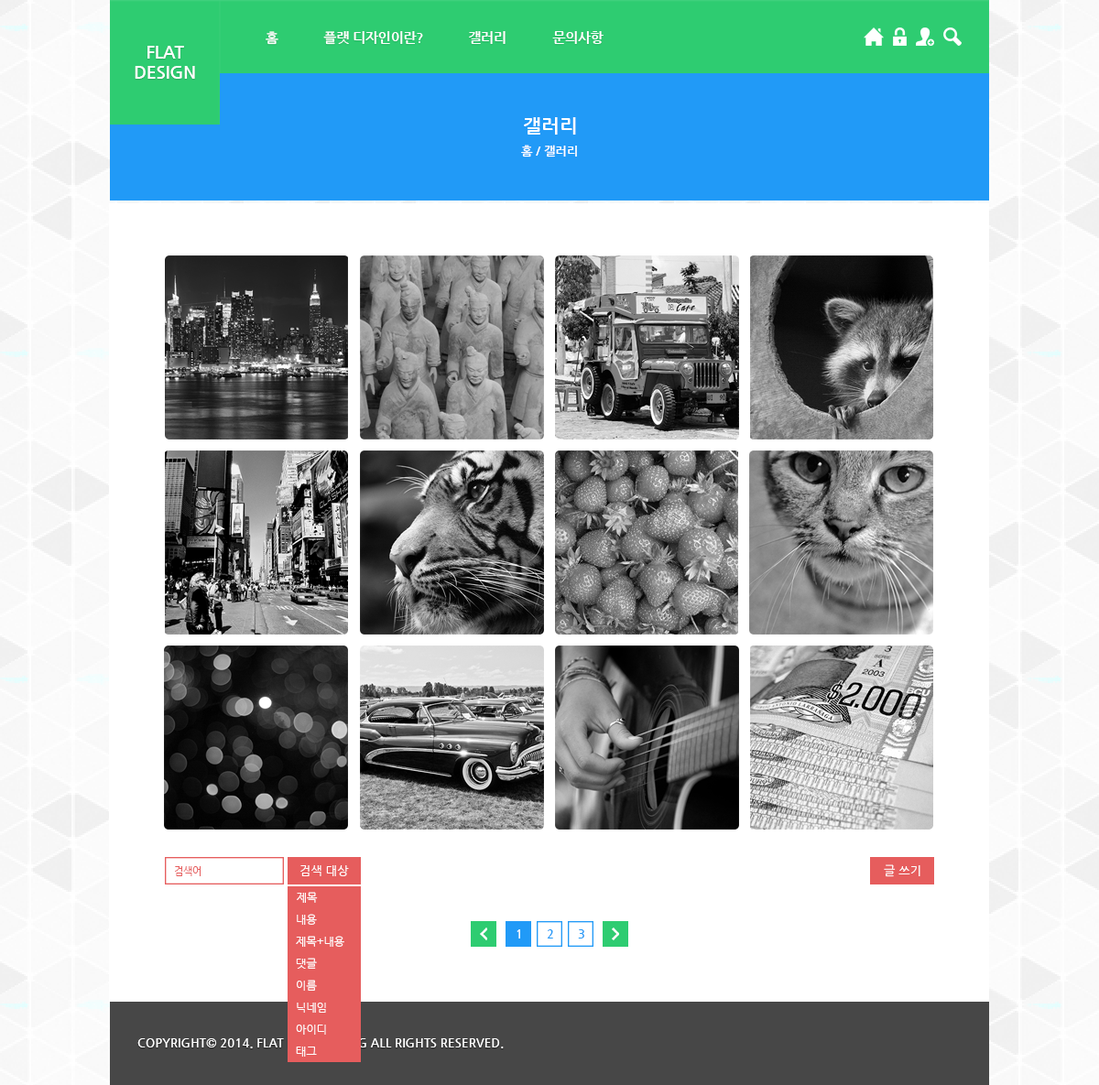
<style>
.page{position:relative;width:1099px;height:1085px;background:#ffffff}
.page>*{position:absolute;margin:0}
.t1{font:13.4px "NanumGothicBold";color:#ffffff}
.t2{font:17.1px "NanumGothicBold";color:#ffffff}
.t3{font:19.5px "NanumGothicBold";color:#ffffff}
.t4{font:12.2px "NanumGothicBold";color:#ffffff}
.t5{font:9.8px "NanumGothic";color:#e65d5d}
.t6{font:12.2px "NanumGothic";color:#ffffff}
.t7{font:11px "NanumGothic";color:#fffefe}
.t8{font:12.2px "NanumGothicBold";color:#219af7}
</style>
<div class="page">
<p class="t1" style="left:266px;top:31px;width:12px;height:14px">홈</p>
<p class="t1" style="left:323px;top:31px;width:100px;height:14px">플랫 디자인이란?</p>
<p class="t1" style="left:469px;top:31px;width:36px;height:13px">갤러리</p>
<p class="t1" style="left:552px;top:31px;width:51px;height:13px">문의사항</p>
<p class="t2" style="left:135px;top:46px;width:60px;height:33px;text-align:center">FLAT<br>DESIGN</p>
<p class="t3" style="left:524px;top:117px;width:52px;height:18px">갤러리</p>
<p class="t4" style="left:521px;top:145px;width:56px;height:13px">홈 / 갤러리</p>
<p class="t5" style="left:175px;top:866px;width:26px;height:10px">검색어</p>
<p class="t6" style="left:300px;top:865px;width:49px;height:11px">검색 대상</p>
<p class="t6" style="left:884px;top:864px;width:36px;height:13px">글 쓰기</p>
<p class="t7" style="left:297px;top:892px;width:21px;height:11px">제목</p>
<p class="t7" style="left:297px;top:914px;width:20px;height:11px">내용</p>
<p class="t4" style="left:516px;top:929px;width:4px;height:10px">1</p>
<p class="t8" style="left:547px;top:929px;width:6px;height:10px">2</p>
<p class="t8" style="left:578px;top:929px;width:6px;height:10px">3</p>
<p class="t7" style="left:296px;top:936px;width:48px;height:11px">제목+내용</p>
<p class="t7" style="left:296px;top:958px;width:21px;height:11px">댓글</p>
<p class="t7" style="left:297px;top:980px;width:20px;height:11px">이름</p>
<p class="t7" style="left:297px;top:1003px;width:29px;height:10px">닉네임</p>
<p class="t7" style="left:296px;top:1025px;width:30px;height:10px">아이디</p>
<p class="t4" style="left:137px;top:1038px;width:367px;height:11px">COPYRIGHT© 2014. FLAT DESIGN BLOG ALL RIGHTS RESERVED.</p>
<p class="t7" style="left:296px;top:1047px;width:21px;height:10px">태그</p>
</div>
